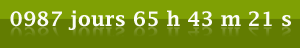
<style>
.page{position:relative;width:300px;height:48px;background:#627c01}
.page>*{position:absolute;margin:0}
.t1{font:20.1px "LucidaFax-Demi";color:#fbfcf7}
</style>
<div class="page">
<p class="t1" style="left:10px;top:10px;width:281px;height:20px">0987 jours 65 h 43 m 21 s</p>
</div>
